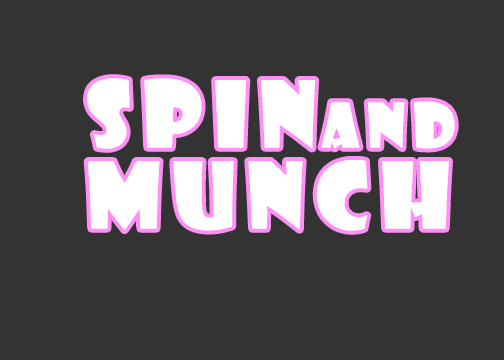
<style>
.page{position:relative;width:504px;height:360px;background:#333333}
.page>*{position:absolute;margin:0}
.t1{font:89.6px "ShowcardGothic-Reg";letter-spacing:0.1em;color:#ffffff;font-weight:bold}
.t2{font:60px "ShowcardGothic-Reg";letter-spacing:0.1em;color:#ffffff;font-weight:bold}
</style>
<div class="page">
<p class="t1" style="left:87px;top:78px;width:229px;height:71px">SPIN</p>
<p class="t2" style="left:321px;top:101px;width:134px;height:48px">and</p>
<p class="t1" style="left:87px;top:160px;width:362px;height:71px">MUNCh</p>
</div>
